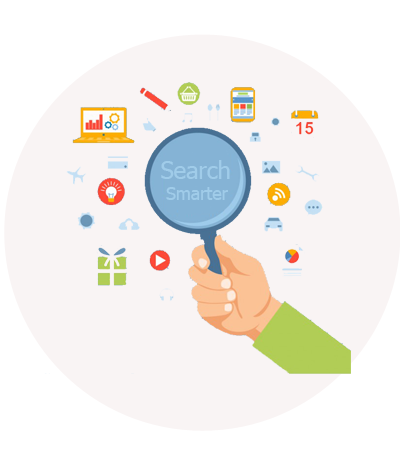
<style>
.page{position:relative;width:400px;height:450px;background:#f9f4f4}
.page>*{position:absolute;margin:0}
.t1{font:17.6px "Tahoma";color:#a0cce9}
.t2{font:23.5px "Tahoma";color:#a0cce9}
</style>
<div class="page">
<p class="t1" style="left:161px;top:160px;width:69px;height:40px"><span class="t2">Search<br></span> Smarter</p>
</div>
